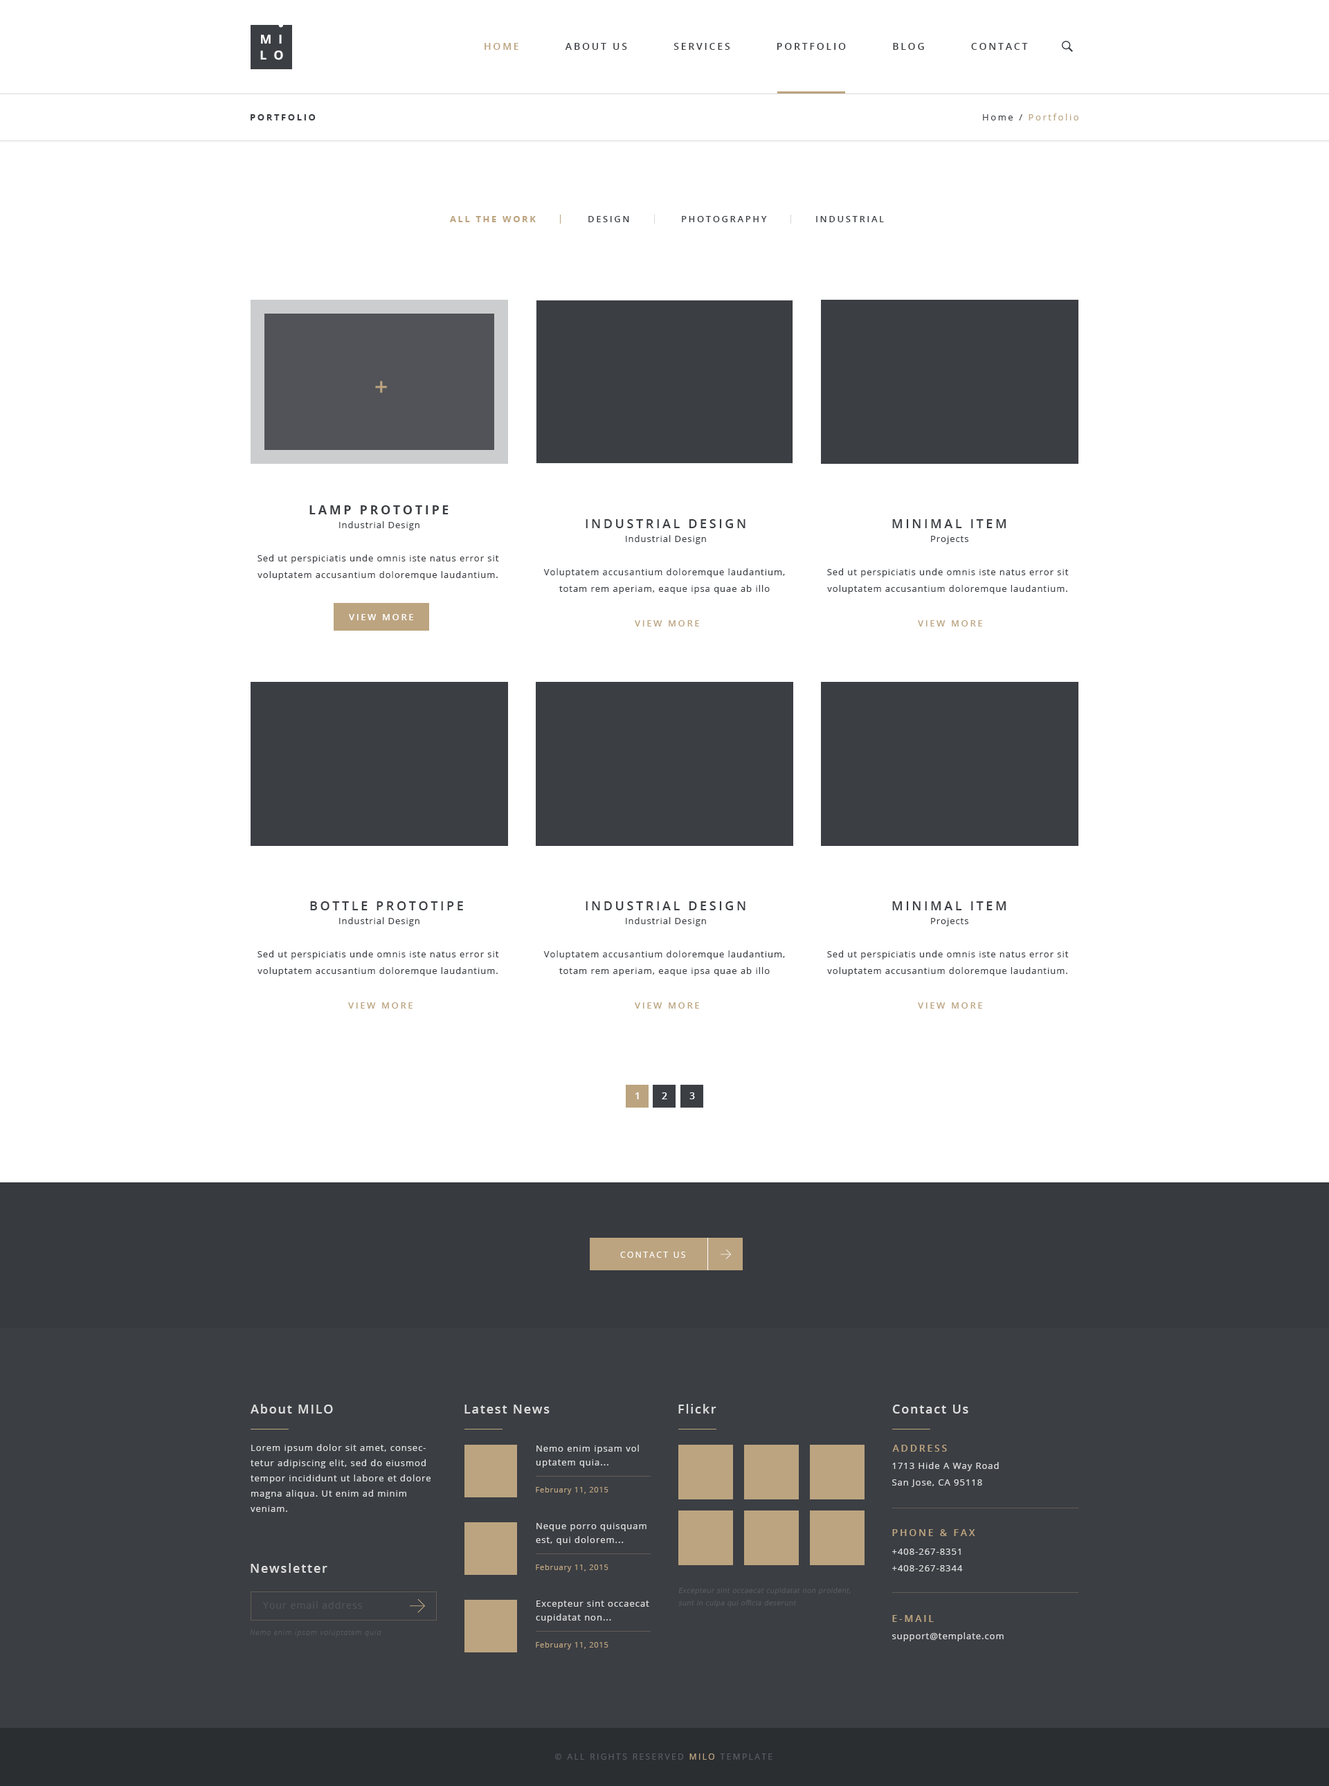
<style>
.page{position:relative;width:1329px;height:1786px;background:#ffffff}
.page>*{position:absolute;margin:0}
.t1{font:12.5px "OpenSans-Bold";letter-spacing:0.55em;color:#ffffff;text-transform:uppercase}
.t2{font:9.7px "OpenSans-Semibold";letter-spacing:0.2em;color:#3b3e43;text-transform:uppercase}
.t3{font:9.7px "OpenSans-Semibold";letter-spacing:0.2em;color:#bca480;text-transform:uppercase}
.t4{font:9px "OpenSans";letter-spacing:0.2em;color:#bca480}
.t5{font:9px "OpenSans";letter-spacing:0.2em;color:#3b3e43}
.t6{font:9px "OpenSans-Bold";letter-spacing:0.2em;color:#3b3e43;text-transform:uppercase}
.t7{font:9px "OpenSans-Bold";letter-spacing:0.2em;color:#bca480;text-transform:uppercase}
.t8{font:9px "OpenSans-Semibold";letter-spacing:0.2em;color:#3b3e43;text-transform:uppercase}
.t9{font:23.7px "OpenSans-Semibold";letter-spacing:0.075em;color:#bca480;text-transform:uppercase}
.t10{font:12.5px "OpenSans-Bold";letter-spacing:0.2em;color:#3b3e43;text-transform:uppercase}
.t11{font:9px "OpenSans";letter-spacing:0.075em;color:#3b3e43}
.t12{font:12.5px "OpenSans-Semibold";letter-spacing:0.2em;color:#3b3e43;text-transform:uppercase}
.t13{font:9px/16.6px "OpenSans";letter-spacing:0.075em;color:#3b3e43}
.t14{font:9px "OpenSans-Semibold";letter-spacing:0.2em;color:#ffffff;text-transform:uppercase}
.t15{font:9px "OpenSans-Semibold";letter-spacing:0.2em;color:#bca480;text-transform:uppercase}
.t16{font:9.7px "OpenSans-Semibold";letter-spacing:0.2em;color:#ffffff}
.t17{font:8.3px "OpenSans";letter-spacing:0.2em;color:#ffffff;text-transform:uppercase}
.t18{font:12.5px "OpenSans-Semibold";letter-spacing:0.1em;color:#dddddd}
.t19{font:9px/15.2px "OpenSans";letter-spacing:0.075em;color:#dddddd}
.t20{font:9px/13.8px "OpenSans";letter-spacing:0.075em;color:#dddddd}
.t21{font:9px/16.6px "OpenSans";letter-spacing:0.075em;color:#dddddd}
.t22{font:7.6px "OpenSans";letter-spacing:0.075em;color:#bca480}
.t23{font:9px/16.6px "OpenSans-Semibold";letter-spacing:0.075em;color:#dddddd}
.t24{font:6.9px/12.5px "OpenSans-Light";letter-spacing:0.075em;color:#585c62;font-style:italic}
.t25{font:9.7px "OpenSans";letter-spacing:0.075em;color:#505459}
.t26{font:7.6px "OpenSansLight-Italic";letter-spacing:0.075em;color:#53575d}
.t27{font:9px "OpenSans";letter-spacing:0.075em;color:#dddddd}
.t28{font:8.3px "OpenSans";letter-spacing:0.2em;color:#585c62;text-transform:uppercase}
.t29{font:8.3px "OpenSans";letter-spacing:0.2em;color:#bca480;text-transform:uppercase}
</style>
<div class="page">
<p class="t1" style="left:261px;top:35px;width:21px;height:9px">mi</p>
<p class="t1" style="left:260px;top:51px;width:23px;height:9px">lo</p>
<p class="t2" style="left:485px;top:43px;width:543px;height:7px"><span class="t3">Home          </span>About Us          Services          Portfolio          Blog          Contact</p>
<p class="t4" style="left:983px;top:114px;width:96px;height:6px"><span class="t5">Home / </span>Portfolio</p>
<p class="t6" style="left:251px;top:114px;width:65px;height:6px">Portfolio</p>
<p class="t7" style="left:450px;top:216px;width:86px;height:6px">all the work</p>
<p class="t8" style="left:588px;top:216px;width:41px;height:6px">Design</p>
<p class="t8" style="left:682px;top:216px;width:85px;height:6px">Photography</p>
<p class="t8" style="left:816px;top:216px;width:68px;height:6px">industrial</p>
<p class="t9" style="left:375px;top:381px;width:12px;height:12px">+</p>
<p class="t10" style="left:309px;top:505px;width:140px;height:9px">Lamp Prototipe</p>
<p class="t11" style="left:339px;top:521px;width:81px;height:9px">Industrial Design</p>
<p class="t12" style="left:586px;top:519px;width:160px;height:9px">industrial design</p>
<p class="t12" style="left:892px;top:519px;width:114px;height:9px">minimal item</p>
<p class="t11" style="left:626px;top:535px;width:80px;height:9px">Industrial Design</p>
<p class="t11" style="left:931px;top:536px;width:38px;height:8px">Projects</p>
<p class="t13" style="left:258px;top:555px;width:241px;height:25px;text-align:center">Sed ut perspiciatis unde omnis iste natus error sit voluptatem accusantium doloremque laudantium.</p>
<p class="t13" style="left:543px;top:568px;width:242px;height:26px;text-align:center">Voluptatem accusantium doloremque laudantium, totam rem aperiam, eaque ipsa quae ab illo</p>
<p class="t13" style="left:827px;top:568px;width:242px;height:26px;text-align:center">Sed ut perspiciatis unde omnis iste natus error sit voluptatem accusantium doloremque laudantium.</p>
<p class="t14" style="left:349px;top:614px;width:64px;height:6px">view more</p>
<p class="t15" style="left:635px;top:620px;width:64px;height:7px">view more</p>
<p class="t15" style="left:918px;top:620px;width:64px;height:7px">view more</p>
<p class="t12" style="left:310px;top:901px;width:153px;height:9px">bottle Prototipe</p>
<p class="t12" style="left:586px;top:901px;width:160px;height:9px">industrial design</p>
<p class="t12" style="left:892px;top:901px;width:114px;height:9px">minimal item</p>
<p class="t11" style="left:339px;top:917px;width:81px;height:9px">Industrial Design</p>
<p class="t11" style="left:626px;top:917px;width:80px;height:9px">Industrial Design</p>
<p class="t11" style="left:931px;top:918px;width:38px;height:8px">Projects</p>
<p class="t13" style="left:258px;top:951px;width:241px;height:25px;text-align:center">Sed ut perspiciatis unde omnis iste natus error sit voluptatem accusantium doloremque laudantium.</p>
<p class="t13" style="left:543px;top:951px;width:242px;height:25px;text-align:center">Voluptatem accusantium doloremque laudantium, totam rem aperiam, eaque ipsa quae ab illo</p>
<p class="t13" style="left:827px;top:951px;width:242px;height:25px;text-align:center">Sed ut perspiciatis unde omnis iste natus error sit voluptatem accusantium doloremque laudantium.</p>
<p class="t15" style="left:348px;top:1002px;width:65px;height:7px">view more</p>
<p class="t15" style="left:635px;top:1002px;width:64px;height:7px">view more</p>
<p class="t15" style="left:918px;top:1002px;width:64px;height:7px">view more</p>
<p class="t16" style="left:636px;top:1092px;width:3px;height:7px">1</p>
<p class="t16" style="left:662px;top:1092px;width:5px;height:7px">2</p>
<p class="t16" style="left:690px;top:1092px;width:5px;height:7px">3</p>
<p class="t17" style="left:620px;top:1252px;width:65px;height:6px">contact us</p>
<p class="t18" style="left:251px;top:1404px;width:82px;height:10px">About MILO</p>
<p class="t18" style="left:465px;top:1405px;width:85px;height:9px">Latest News</p>
<p class="t18" style="left:678px;top:1404px;width:39px;height:10px">Flickr</p>
<p class="t18" style="left:892px;top:1405px;width:77px;height:9px">Contact Us</p>
<p class="t19" style="left:251px;top:1444px;width:180px;height:68px">Lorem ipsum dolor sit amet, consectetur adipiscing elit, sed do eiusmod tempor incididunt ut labore et dolore magna aliqua. Ut enim ad minim veniam.</p>
<p class="t20" style="left:536px;top:1445px;width:103px;height:23px">Nemo enim ipsam vol uptatem quia...</p>
<p class="t3" style="left:892px;top:1445px;width:55px;height:7px">Address</p>
<p class="t21" style="left:892px;top:1462px;width:107px;height:25px">1713 Hide A Way Road<br>San Jose, CA 95118</p>
<p class="t22" style="left:536px;top:1487px;width:73px;height:8px">February 11, 2015</p>
<p class="t20" style="left:536px;top:1523px;width:111px;height:22px">Neque porro quisquam est, qui dolorem...</p>
<p class="t3" style="left:892px;top:1529px;width:83px;height:7px">Phone &amp; Fax</p>
<p class="t21" style="left:892px;top:1549px;width:71px;height:23px"><span class="t23"><br></span>+408-267-8351<br>+408-267-8344</p>
<p class="t18" style="left:251px;top:1563px;width:76px;height:10px">Newsletter</p>
<p class="t22" style="left:536px;top:1565px;width:73px;height:7px">February 11, 2015</p>
<p class="t24" style="left:678px;top:1587px;width:173px;height:21px">Excepteur sint occaecat cupidatat non proident, sunt in culpa qui officia deserunt</p>
<p class="t25" style="left:263px;top:1601px;width:99px;height:8px">Your email address</p>
<p class="t20" style="left:536px;top:1601px;width:113px;height:22px">Excepteur sint occaecat cupidatat non...</p>
<p class="t3" style="left:892px;top:1615px;width:42px;height:7px">E-mail</p>
<p class="t26" style="left:250px;top:1630px;width:131px;height:7px">Nemo enim ipsam voluptatem quia</p>
<p class="t27" style="left:892px;top:1632px;width:112px;height:9px">support@template.com</p>
<p class="t22" style="left:536px;top:1642px;width:73px;height:8px">February 11, 2015</p>
<p class="t28" style="left:555px;top:1754px;width:218px;height:6px">© All Rights Reserved <span class="t29">MILO</span> template</p>
</div>
